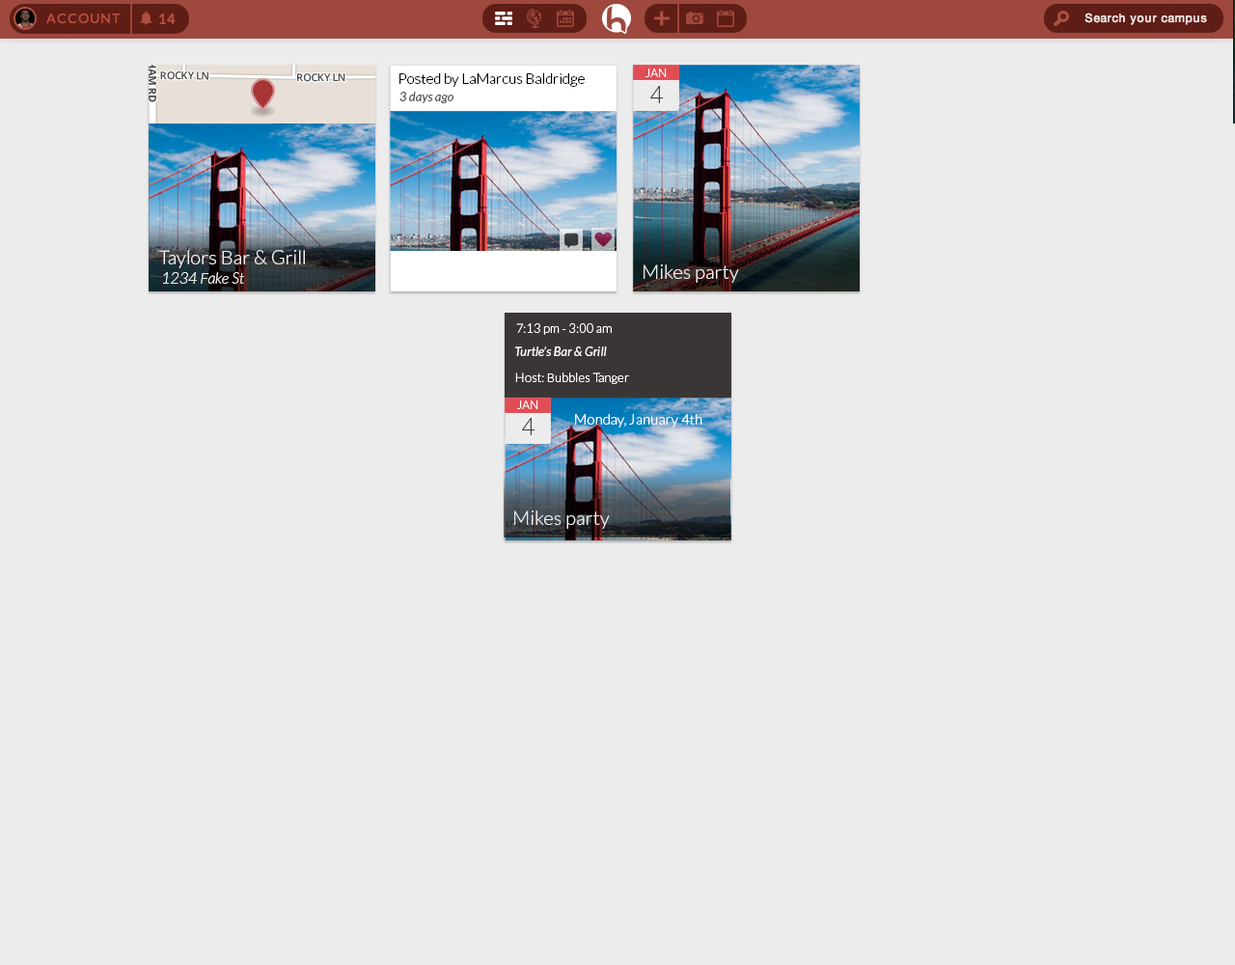
<style>
.page{position:relative;width:1235px;height:965px;background:#ececec}
.page>*{position:absolute;margin:0}
.t1{font:14.5px "Lato-Light";color:#000000}
.t2{font:11.9px "Lato-Light";color:#ffffff}
.t3{font:23.8px "Lato-Light";color:#434343}
.t4{font:12.5px "Lato-Italic";color:#4e4e4e}
.t5{font:19.3px "Lato-Light";color:#ececec}
.t6{font:15.4px "Lato-LightItalic";color:#ececec}
.t7{font:12.5px "Lato-Light";color:#ffffff}
.t8{font:12.5px "Lato-Italic";color:#ffffff}
.t9{font:14.5px "Lato-Light";color:#ffffff}
</style>
<div class="page">
<p class="t1" style="left:400px;top:72px;width:185px;height:15px">Posted by LaMarcus Baldridge</p>
<p class="t2" style="left:646px;top:69px;width:21px;height:8px">JAN</p>
<p class="t3" style="left:651px;top:86px;width:13px;height:17px">4</p>
<p class="t4" style="left:400px;top:92px;width:54px;height:11px">3 days ago</p>
<p class="t5" style="left:158px;top:250px;width:147px;height:18px">Taylors Bar &amp; Grill</p>
<p class="t5" style="left:644px;top:264px;width:95px;height:19px">Mikes party</p>
<p class="t6" style="left:163px;top:272px;width:82px;height:12px">1234 Fake St</p>
<p class="t7" style="left:516px;top:323px;width:96px;height:12px">7:13 pm - 3:00 am</p>
<p class="t8" style="left:514px;top:347px;width:93px;height:9px">Turtle’s Bar &amp; Grill</p>
<p class="t7" style="left:515px;top:373px;width:114px;height:11px">Host: Bubbles Tanger</p>
<p class="t2" style="left:517px;top:401px;width:22px;height:8px">JAN</p>
<p class="t3" style="left:522px;top:418px;width:14px;height:17px">4</p>
<p class="t9" style="left:575px;top:414px;width:128px;height:14px">Monday, January 4th</p>
<p class="t5" style="left:514px;top:511px;width:96px;height:18px">Mikes party</p>
</div>
